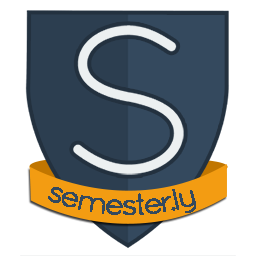
<style>
.page{position:relative;width:256px;height:256px;background:#ffffff}
.page>*{position:absolute;margin:0}
.t1{font:29.9px "Quicksand-Regular";letter-spacing:-0.1em;color:#34495e}
</style>
<div class="page">
<p class="t1" style="left:48px;top:187px;width:148px;height:28px;rotate:2deg">semester.ly</p>
</div>
